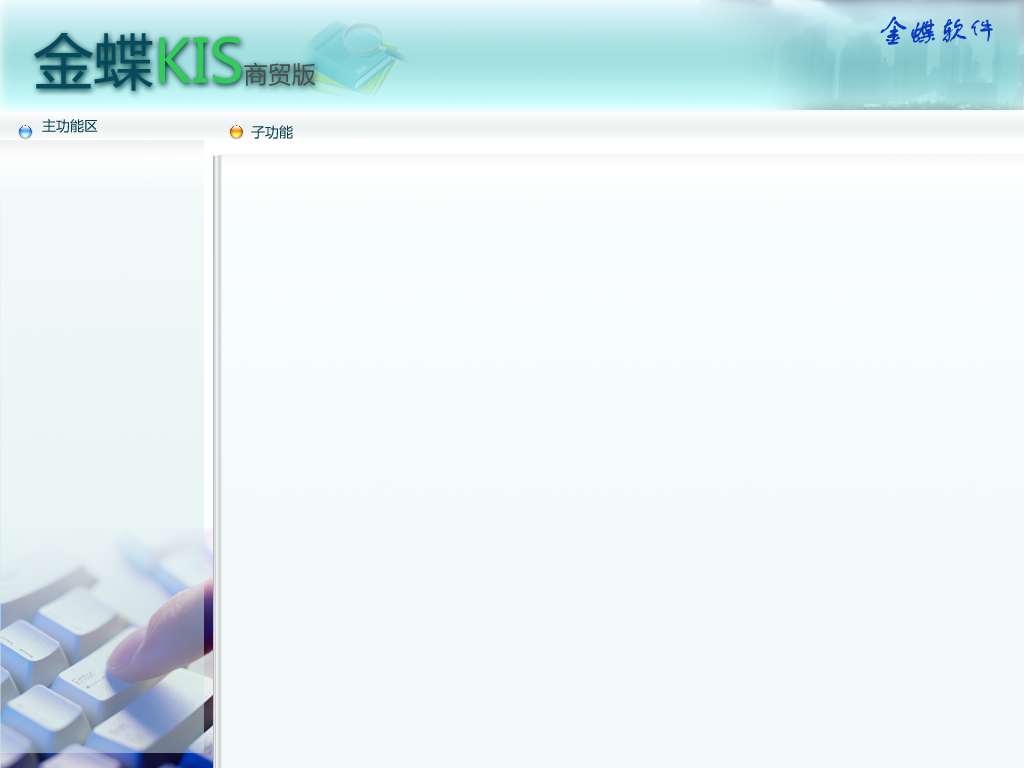
<style>
.page{position:relative;width:1024px;height:768px}
.page>*{position:absolute;margin:0}
.t1{font:30px "FZSTK--GBK1-0";color:#0b3ac0}
.t2{font:60px "MicrosoftYaHei";color:#35ca5c}
.t3{font:60px "MicrosoftYaHei";color:#054b5d}
.t4{font:24px "MicrosoftYaHei";color:#4b4f4c}
.t5{font:14px "MicrosoftYaHei";color:#033b49}
</style>
<div class="page">
<p class="t1" style="left:880px;top:16px;width:113px;height:29px">金蝶软件</p>
<p class="t2" style="left:34px;top:33px;width:282px;height:58px"><span class="t3">金蝶</span>KIS<span class="t4">商贸版</span></p>
<p class="t5" style="left:42px;top:119px;width:56px;height:14px">主功能区</p>
<p class="t5" style="left:251px;top:125px;width:42px;height:14px">子功能</p>
</div>
